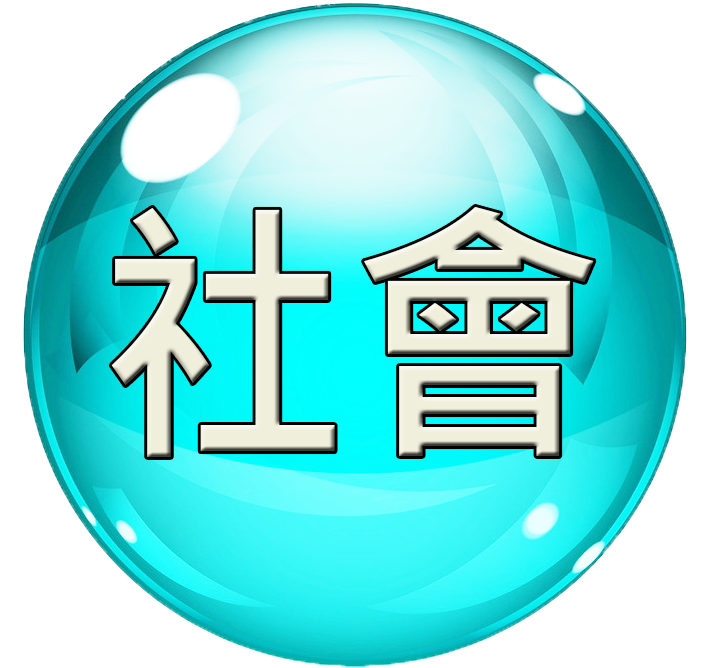
<style>
.page{position:relative;width:717px;height:668px;background:#ffffff}
.page>*{position:absolute;margin:0}
.t1{font:283.1px "MicrosoftJhengHeiBold";color:#f0efdc;scale:0.9 1}
</style>
<div class="page">
<p class="t1" style="left:111px;top:206px;width:483px;height:251px">社會</p>
</div>
